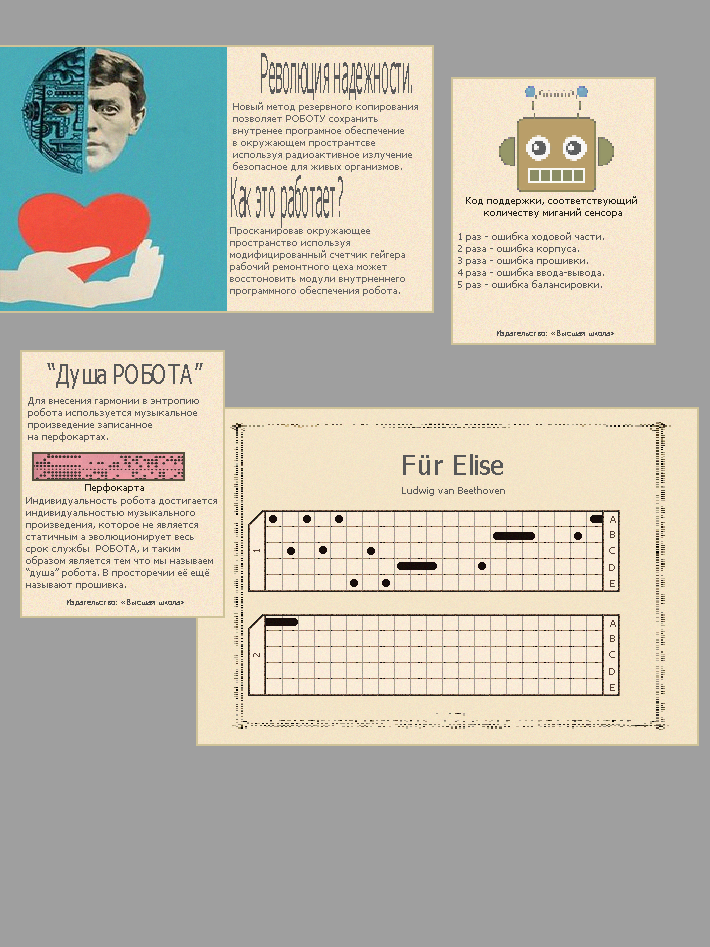
<style>
.page{position:relative;width:710px;height:947px;background:#9f9f9f}
.page>*{position:absolute;margin:0}
.t1{font:54.6px "Tahoma";color:#5a5a5a;scale:0.24 1}
.t2{font:10px "Tahoma";color:#636363}
.t3{font:10px "Tahoma";color:#222019}
.t4{font:10px "Tahoma";color:#585858}
.t5{font:8px "Tahoma";color:#4e4e4e}
.t6{font:26.5px "Tahoma";color:#585858;scale:0.74 1}
.t7{font:26.5px "Tahoma";color:#585858}
</style>
<div class="page">
<p class="t1" style="left:261px;top:53px;width:151px;height:47px">Революция надежности.</p>
<p class="t2" style="left:233px;top:102px;width:185px;height:70px">Новый метод резервного копирования<br>позволяет РОБОТУ сохранить<br>внутренее програмное обеспечение<br>в окружающем пространтсве<br>используя радиоактивное излучение<br>безопасное для живых организмов.</p>
<p class="t1" style="left:231px;top:175px;width:112px;height:53px">Как это работает?</p>
<p class="t3" style="left:466px;top:196px;width:171px;height:22px;text-align:center">Код поддержки, соответствующий <br>количеству миганий сенсора</p>
<p class="t2" style="left:230px;top:227px;width:175px;height:69px">Просканировав окружающее <br>пространство используя <br>модифицированный счетчик гейгера <br>рабочий ремонтного цеха может <br>восстоновить модули внутрненнего <br>программного обеспечения робота.</p>
<p class="t4" style="left:458px;top:232px;width:146px;height:58px">1 раз - ошибка ходовой части.<br>2 раза - ошибка корпуса.<br>3 раза - ошибка прошивки.<br>4 раза - ошибка ввода-вывода.<br>5 раз - ошибка балансировки.</p>
<p class="t5" style="left:497px;top:330px;width:117px;height:7px">Издательство: «Высшая школа»</p>
<p class="t6" style="left:47px;top:363px;width:156px;height:26px">“Душа РОБОТА”</p>
<p class="t4" style="left:28px;top:397px;width:171px;height:45px">Для внесения гармонии в энтропию<br>робота используется музыкальное<br>произведение записанное <br>на перфокартах.</p>
<p class="t7" style="left:403px;top:454px;width:100px;height:21px">Für Elise</p>
<p class="t3" style="left:85px;top:483px;width:59px;height:10px">Перфокарта</p>
<p class="t4" style="left:402px;top:486px;width:103px;height:10px">Ludwig van Beethoven</p>
<p class="t4" style="left:26px;top:496px;width:191px;height:94px">Индивидуальность робота достигается<br>индивидуальностью музыкального<br>произведения, которое не является <br>статичным а эволюционирует весь <br>срок службы  РОБОТА, и таким <br>образом является тем что мы называем <br>“душа” робота. В просторечии её ещё <br>называют прошивка.</p>
<p class="t5" style="left:67px;top:599px;width:117px;height:7px">Издательство: «Высшая школа»</p>
</div>
